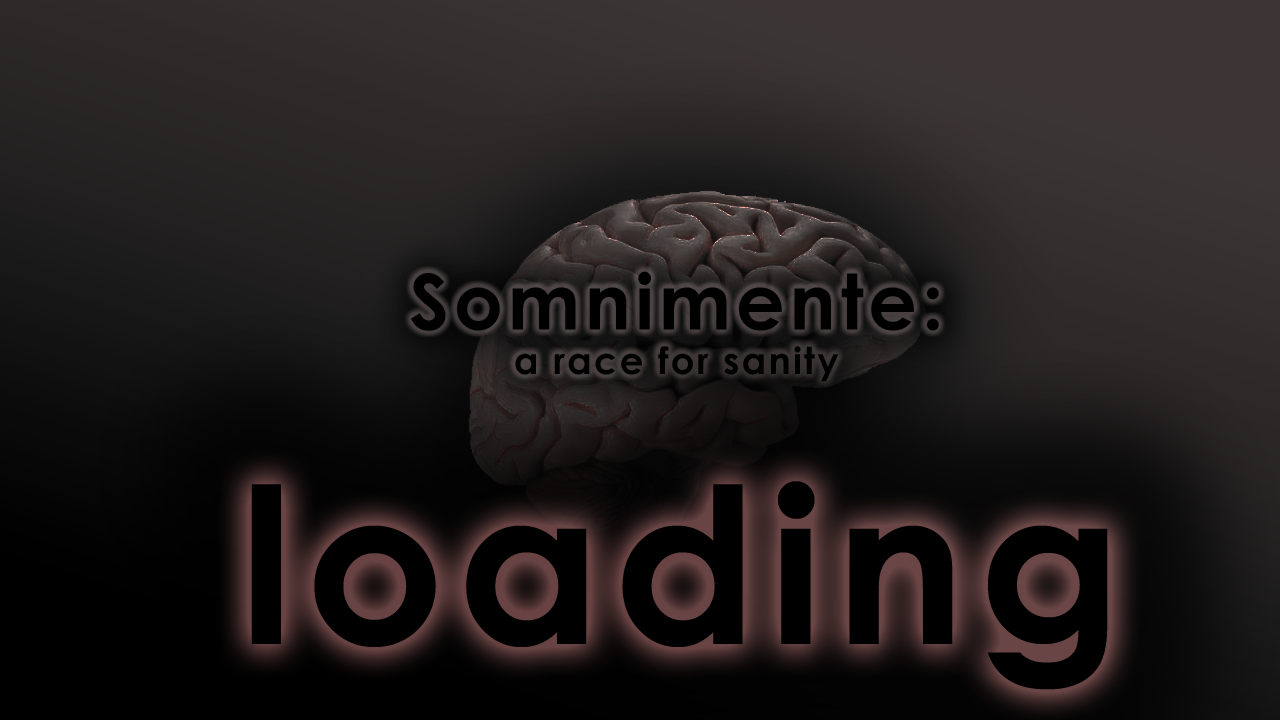
<style>
.page{position:relative;width:1280px;height:720px}
.page>*{position:absolute;margin:0}
.t1{font:37px "CenturyGothic-Bold";letter-spacing:0.06em;color:#000000}
.t2{font:77px "CenturyGothic-Bold";letter-spacing:0.06em;color:#000000}
.t3{font:217px "CenturyGothic-Bold";letter-spacing:0.06em;color:#000000}
</style>
<div class="page">
<p class="t1" style="left:411px;top:271px;width:528px;height:111px;text-align:center"><span class="t2">Somnimente:<br></span>a race for sanity</p>
<p class="t3" style="left:251px;top:481px;width:857px;height:209px">loading</p>
</div>
